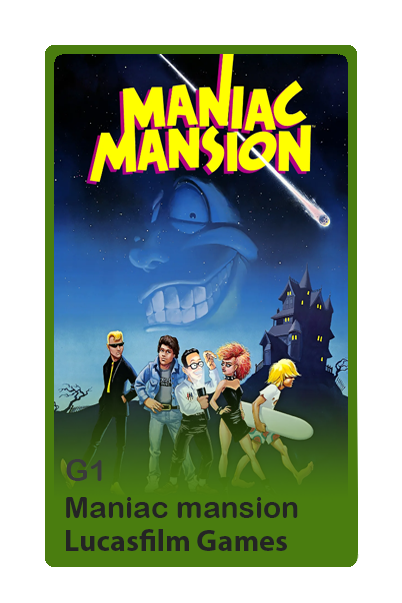
<style>
.page{position:relative;width:402px;height:603px;background:#ffffff}
.page>*{position:absolute;margin:0}
.t1{font:30px "ArialRoundedMTBold";color:#3a3a3a}
.t2{font:30px "ArialRoundedMTBold";color:#242424}
.t3{font:30px "MyriadPro-Bold";color:#242424}
</style>
<div class="page">
<p class="t1" style="left:66px;top:459px;width:36px;height:22px">G1</p>
<p class="t2" style="left:66px;top:497px;width:232px;height:21px">Maniac mansion</p>
<p class="t3" style="left:66px;top:529px;width:221px;height:22px">Lucasfilm Games</p>
</div>
